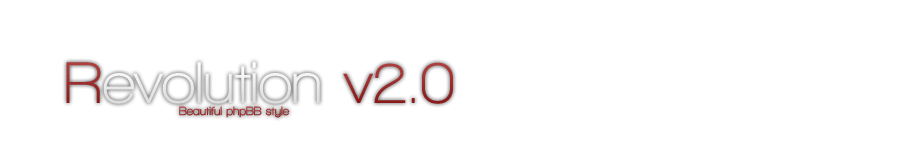
<style>
.page{position:relative;width:900px;height:147px;background:#ffffff}
.page>*{position:absolute;margin:0}
.t1{font:60px "WalkwayBold";color:#ffffff}
.t2{font:60px "WalkwayBold";color:#9f1f1f}
.t3{font:12px "WalkwayBold";color:#9f1f1f}
</style>
<div class="page">
<p class="t1" style="left:66px;top:61px;width:387px;height:43px"><span class="t2">R</span>evolution <span class="t2">v2.0</span></p>
<p class="t3" style="left:179px;top:106px;width:111px;height:12px">Beautiful phpBB style</p>
</div>
